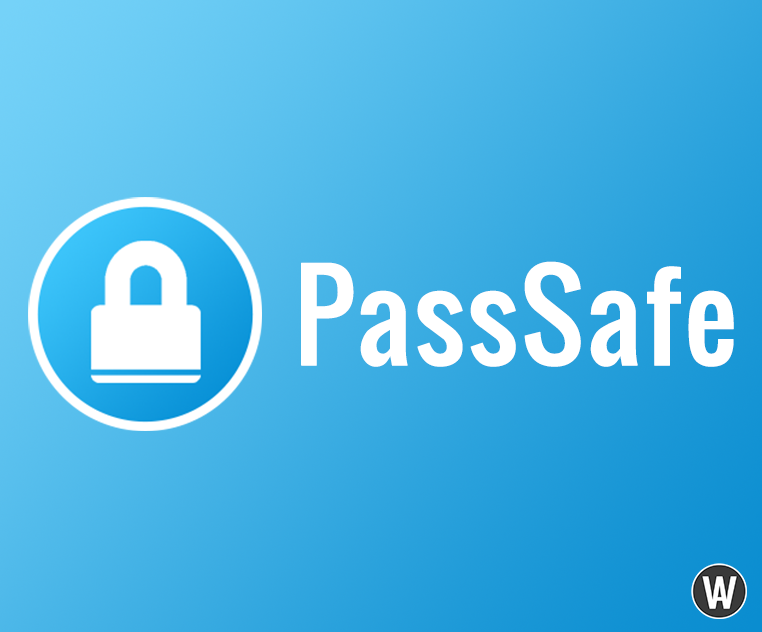
<style>
.page{position:relative;width:762px;height:632px}
.page>*{position:absolute;margin:0}
.t1{font:116.4px "Oswald-Regular";color:#ffffff;font-weight:bold}
</style>
<div class="page">
<p class="t1" style="left:301px;top:261px;width:433px;height:106px">PassSafe</p>
</div>
